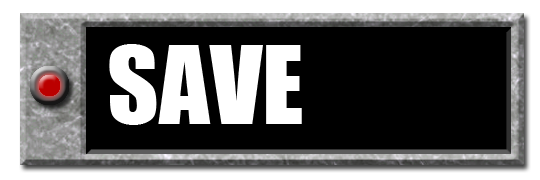
<style>
.page{position:relative;width:540px;height:180px;background:#000000}
.page>*{position:absolute;margin:0}
.t1{font:100px "Impact";color:#ffffff}
</style>
<div class="page">
<p class="t1" style="left:109px;top:44px;width:193px;height:81px">SAVE</p>
</div>
